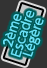
<style>
.page{position:relative;width:47px;height:68px;background:#333333}
.page>*{position:absolute;margin:0}
.t1{font:12px/11px "UDShinGoPro-Light";color:#69e2f9;font-weight:bold}
</style>
<div class="page">
<p class="t1" style="left:3px;top:10px;width:41px;height:48px;text-align:center;rotate:-72deg">2ème<br>Escadre<br>Légère</p>
</div>
